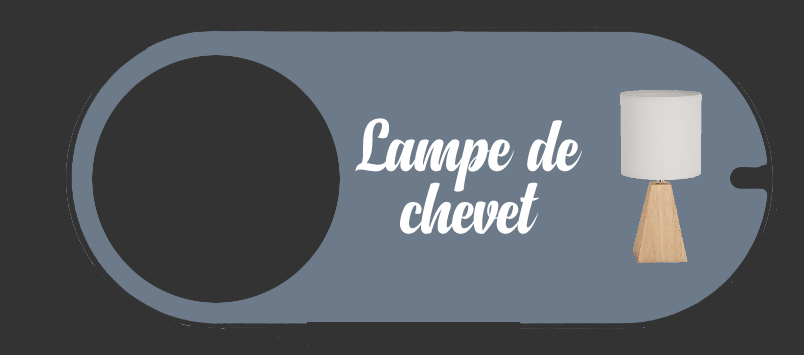
<style>
.page{position:relative;width:804px;height:355px;background:#333333}
.page>*{position:absolute;margin:0}
.t1{font:75px/62.5px "Anydore";letter-spacing:-0.014em;color:#ffffff}
</style>
<div class="page">
<p class="t1" style="left:355px;top:118px;width:227px;height:116px;text-align:center">Lampe de<br>chevet</p>
</div>
